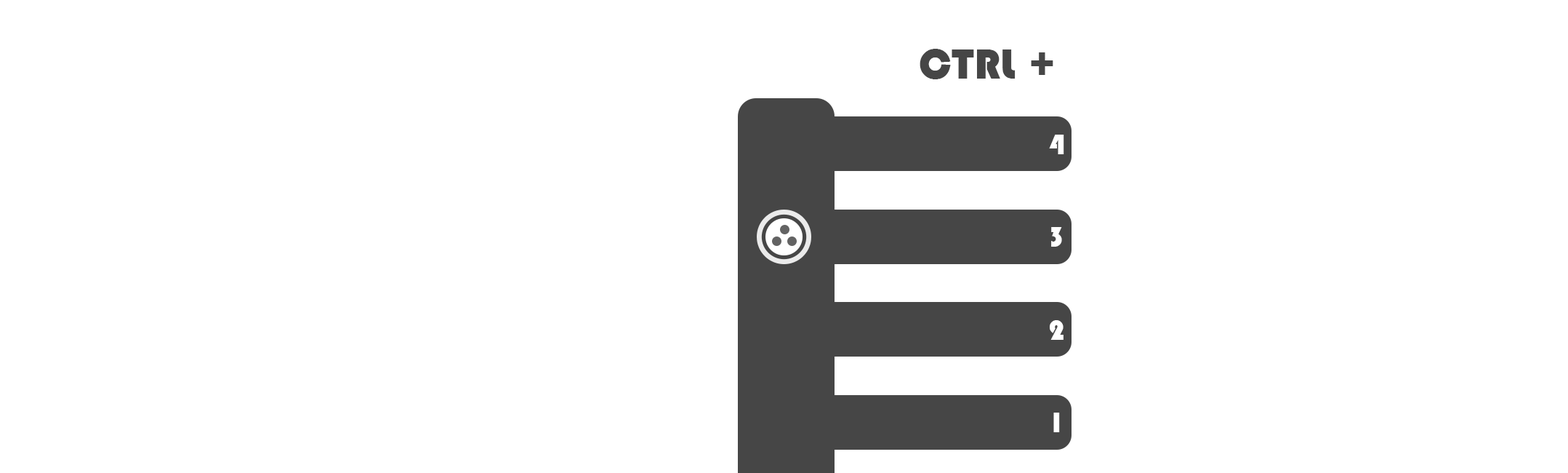
<style>
.page{position:relative;width:1568px;height:473px;background:#ffffff}
.page>*{position:absolute;margin:0}
.t1{font:43.6px "Bauhaus93";color:#464646}
.t2{font:29.1px "Bauhaus93";color:#ffffff}
</style>
<div class="page">
<p class="t1" style="left:920px;top:49px;width:133px;height:30px">CTRL +</p>
<p class="t2" style="left:1049px;top:134px;width:15px;height:20px">4</p>
<p class="t2" style="left:1051px;top:227px;width:11px;height:19px">3</p>
<p class="t2" style="left:1050px;top:320px;width:14px;height:19px">2</p>
<p class="t2" style="left:1053px;top:412px;width:7px;height:20px">1</p>
</div>
